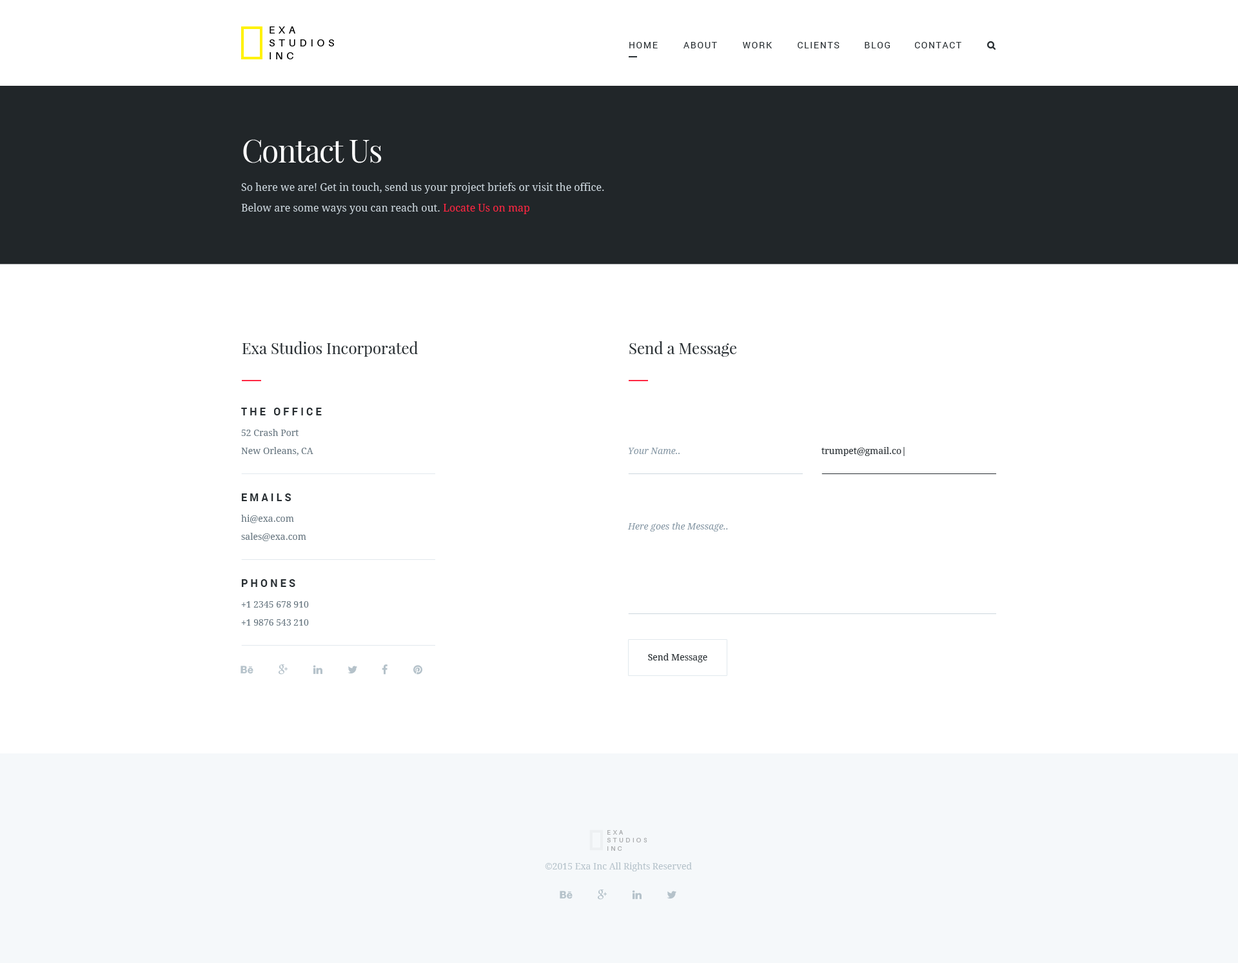
<style>
.page{position:relative;width:1238px;height:963px;background:#ffffff}
.page>*{position:absolute;margin:0}
.t1{font:10.3px/12.9px "Aileron-Regular";letter-spacing:0.36em;color:#000000;text-transform:uppercase}
.t2{font:9px "Roboto-Regular";letter-spacing:0.12em;color:#292f33;text-transform:uppercase}
.t3{font:31px "PlayfairDisplay-Regular";letter-spacing:-0.04em;color:#ffffff}
.t4{font:10.3px/20.6px "DroidSerif";color:#ccd6dd}
.t5{font:10.3px/20.6px "DroidSerif";color:#ff2641}
.t6{font:15.5px "PlayfairDisplay-Regular";color:#292f33}
.t7{font:10.3px "Roboto-Bold";letter-spacing:0.26em;color:#292f33;text-transform:uppercase}
.t8{font:9px/18.1px "DroidSerif";color:#66757f}
.t9{font:9px "DroidSerif-Italic";color:#8899a6}
.t10{font:9px "DroidSerif";color:#292f33}
.t11{font:6.3px/7.9px "Aileron-Regular";letter-spacing:0.36em;color:#abadaf;text-transform:uppercase}
.t12{font:9px "DroidSerif";color:#b5c2ca}
</style>
<div class="page">
<p class="t1" style="left:269px;top:26px;width:65px;height:33px">Exa<br>Studios<br>Inc</p>
<p class="t2" style="left:629px;top:42px;width:29px;height:6px">HOME</p>
<p class="t2" style="left:684px;top:42px;width:33px;height:6px">ABOUT</p>
<p class="t2" style="left:743px;top:42px;width:29px;height:6px">WORK</p>
<p class="t2" style="left:798px;top:42px;width:42px;height:6px">CLIENTS</p>
<p class="t2" style="left:865px;top:42px;width:26px;height:6px">BLOG</p>
<p class="t2" style="left:915px;top:42px;width:47px;height:6px">CONTACT</p>
<p class="t3" style="left:243px;top:139px;width:139px;height:24px">Contact Us</p>
<p class="t4" style="left:241px;top:183px;width:363px;height:31px">So here we are! Get in touch, send us your project briefs or visit the office. <br>Below are some ways you can reach out. <span class="t5">Locate Us on map</span></p>
<p class="t6" style="left:243px;top:341px;width:175px;height:16px">Exa Studios Incorporated</p>
<p class="t6" style="left:629px;top:341px;width:108px;height:16px">Send a Message</p>
<p class="t7" style="left:241px;top:408px;width:81px;height:7px">THE OFFICE</p>
<p class="t8" style="left:241px;top:429px;width:72px;height:26px">52 Crash Port<br>New Orleans, CA</p>
<p class="t9" style="left:629px;top:448px;width:51px;height:6px">Your Name..</p>
<p class="t10" style="left:822px;top:447px;width:83px;height:9px">trumpet@gmail.co|</p>
<p class="t7" style="left:242px;top:493px;width:49px;height:8px">EMAILS</p>
<p class="t8" style="left:241px;top:515px;width:65px;height:26px">hi@exa.com<br>sales@exa.com</p>
<p class="t9" style="left:628px;top:522px;width:100px;height:9px">Here goes the Message..</p>
<p class="t7" style="left:242px;top:579px;width:53px;height:8px">PHONES</p>
<p class="t8" style="left:241px;top:601px;width:68px;height:25px">+1 2345 678 910<br>+1 9876 543 210</p>
<p class="t10" style="left:648px;top:653px;width:60px;height:9px">Send Message</p>
<p class="t11" style="left:607px;top:830px;width:41px;height:21px">Exa<br>Studios<br>Inc</p>
<p class="t12" style="left:545px;top:862px;width:147px;height:9px">©2015 Exa Inc All Rights Reserved</p>
</div>
